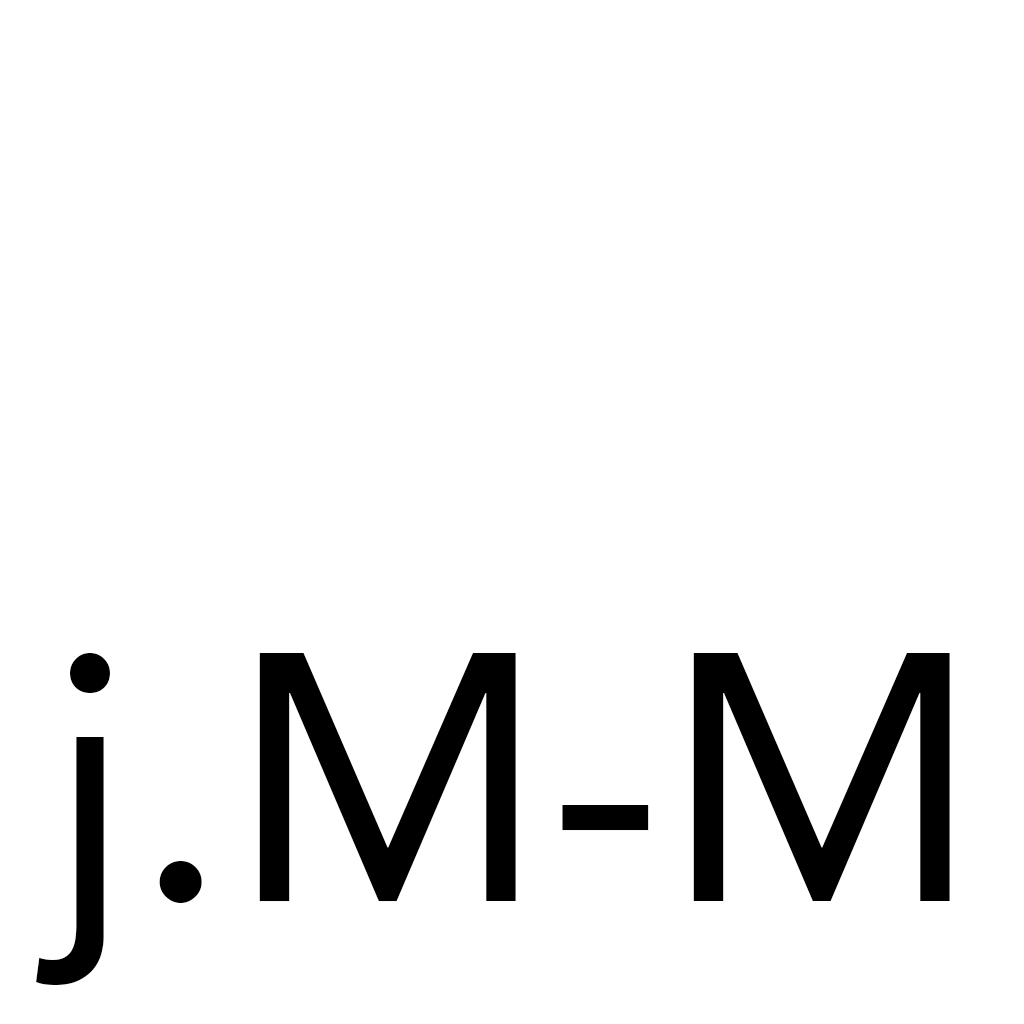
<style>
.page{position:relative;width:1024px;height:1024px;background:#ffffff}
.page>*{position:absolute;margin:0}
.t1{font:350px "Avenir-Roman";color:#000000}
</style>
<div class="page">
<p class="t1" style="left:36px;top:653px;width:914px;height:332px">j.M-M</p>
</div>
